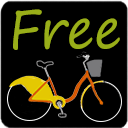
<style>
.page{position:relative;width:128px;height:128px;background:#000000}
.page>*{position:absolute;margin:0}
.t1{font:53.8px "SegoePrint";color:#99ae19}
</style>
<div class="page">
<p class="t1" style="left:13px;top:9px;width:107px;height:41px">Free</p>
</div>
